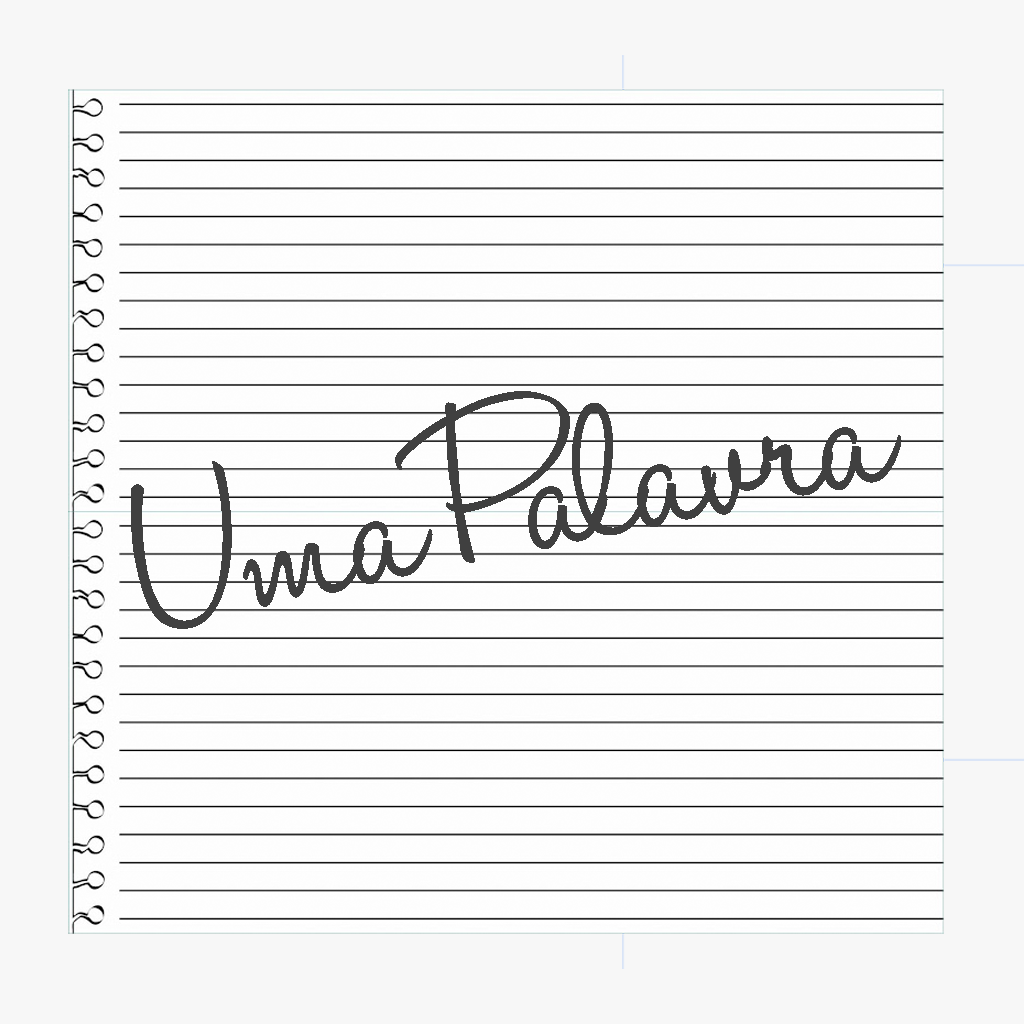
<style>
.page{position:relative;width:1024px;height:1024px;background:#f7f7f7}
.page>*{position:absolute;margin:0}
.t1{font:250px "HaloHandletter";letter-spacing:-0.02em;color:#404040}
</style>
<div class="page">
<p class="t1" style="left:131px;top:391px;width:771px;height:238px;rotate:-11deg">Uma Palavra</p>
</div>
